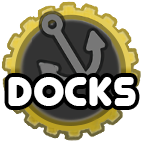
<style>
.page{position:relative;width:142px;height:142px;background:#ffffff}
.page>*{position:absolute;margin:0}
.t1{font:48px "Junegull";color:#ffffff}
</style>
<div class="page">
<p class="t1" style="left:8px;top:77px;width:128px;height:29px">DOCKS</p>
</div>
